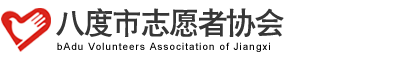
<style>
.page{position:relative;width:400px;height:62px;background:#ffffff}
.page>*{position:absolute;margin:0}
.t1{font:30px "CTCuHeiSJ";letter-spacing:-0.05em;color:#363636;text-transform:uppercase}
.t2{font:10px "ArialMT";letter-spacing:0.1em;color:#010101}
</style>
<div class="page">
<p class="t1" style="left:56px;top:8px;width:228px;height:29px">八度市志愿者协会</p>
<p class="t2" style="left:57px;top:42px;width:213px;height:10px">bAdu Volunteers Associtation of Jiangxi</p>
</div>
